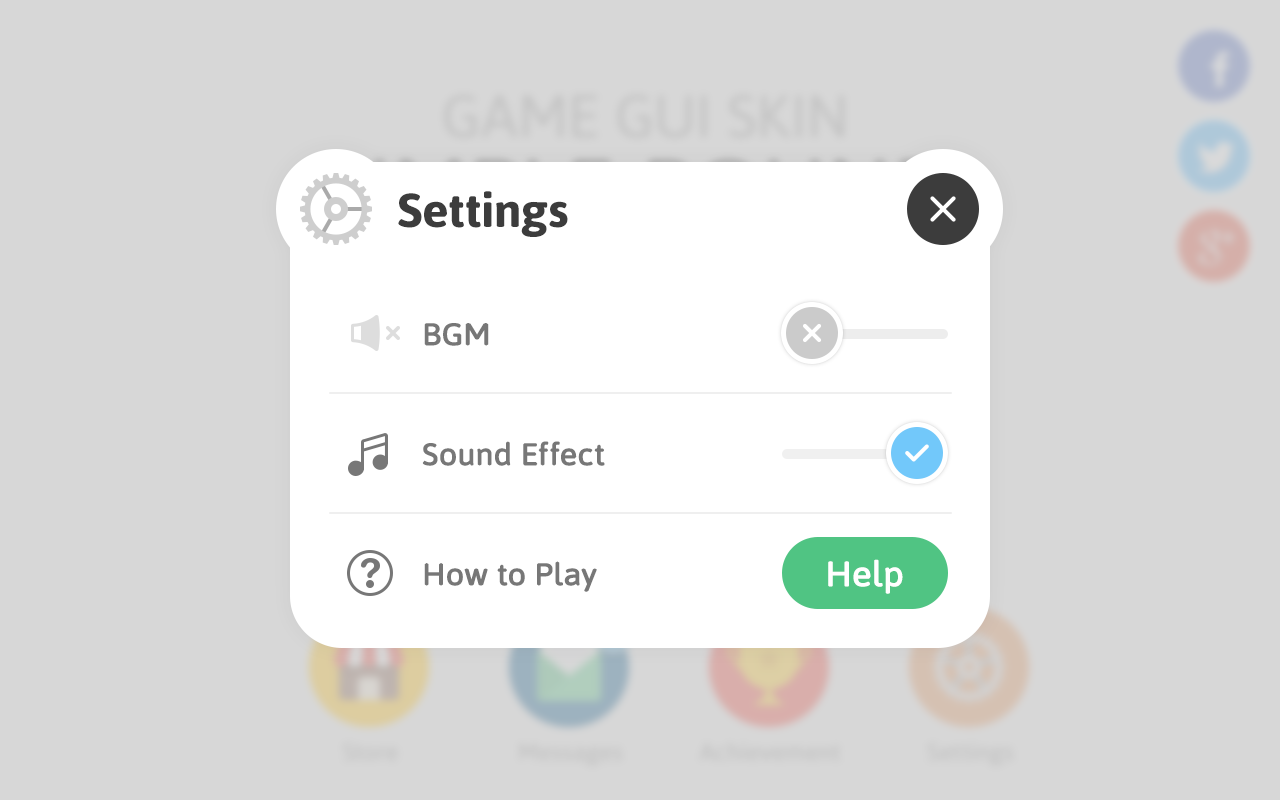
<style>
.page{position:relative;width:1280px;height:800px;background:#d7d7d7}
.page>*{position:absolute;margin:0}
.t1{font:47.5px "Asap-Bold";letter-spacing:-0.01em;color:#3c3c3c;scale:1.05 1}
.t2{font:30.4px "Asap-Regular";letter-spacing:-0.01em;color:#777777;font-weight:bold;scale:1.05 1}
.t3{font:34.2px "Asap-Regular";letter-spacing:-0.01em;color:#ffffff;font-weight:bold;scale:1.05 1}
</style>
<div class="page">
<p class="t1" style="left:398px;top:191px;width:170px;height:46px">Settings</p>
<p class="t2" style="left:424px;top:323px;width:65px;height:23px">BGM</p>
<p class="t2" style="left:422px;top:441px;width:183px;height:25px">Sound Effect</p>
<p class="t2" style="left:424px;top:561px;width:173px;height:31px">How to Play</p>
<p class="t3" style="left:828px;top:559px;width:75px;height:35px">Help</p>
</div>
